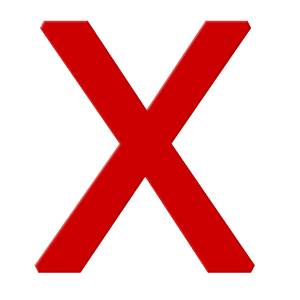
<style>
.page{position:relative;width:300px;height:300px;background:#ffffff}
.page>*{position:absolute;margin:0}
.t1{font:337.7px "HelveticaLTStd-Roman";letter-spacing:0.04em;color:#cc0000;font-weight:bold}
</style>
<div class="page">
<p class="t1" style="left:34px;top:20px;width:221px;height:253px">X</p>
</div>
